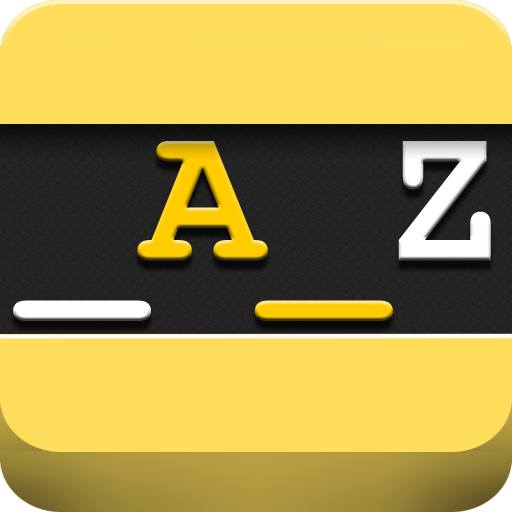
<style>
.page{position:relative;width:512px;height:512px;background:#fddd5b}
.page>*{position:absolute;margin:0}
.t1{font:201.5px "CourierNewPS-BoldMT";color:#ffcc00}
.t2{font:201.5px "CourierNewPS-BoldMT";color:#ffffff}
</style>
<div class="page">
<p class="t1" style="left:13px;top:141px;width:478px;height:180px"><span class="t2">_</span>A_<span class="t2">Z</span></p>
</div>
